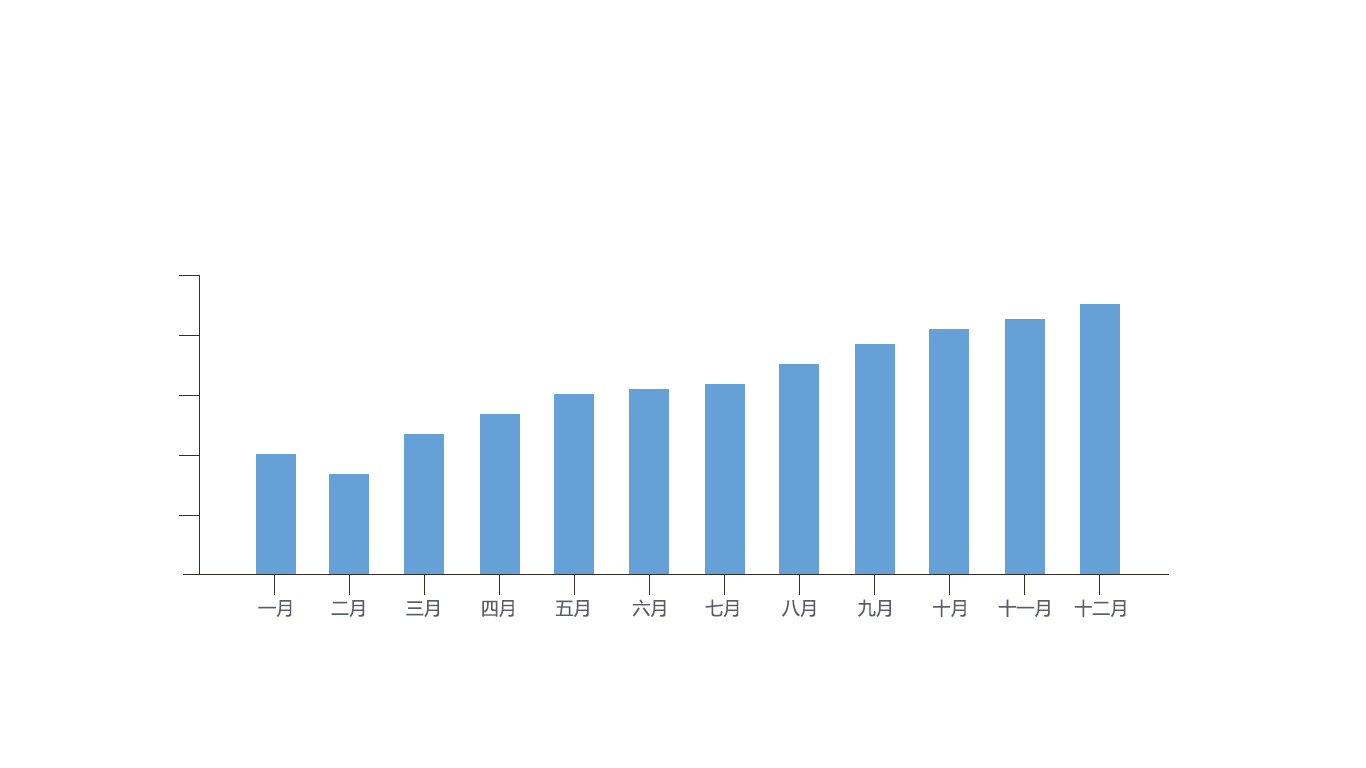
<style>
.page{position:relative;width:1366px;height:768px;background:#ffffff}
.page>*{position:absolute;margin:0}
.t1{font:18px "MicrosoftYaHei";color:#585d68}
</style>
<div class="page">
<p class="t1" style="left:258px;top:600px;width:34px;height:17px">一月</p>
<p class="t1" style="left:331px;top:600px;width:34px;height:17px">二月</p>
<p class="t1" style="left:406px;top:600px;width:33px;height:17px">三月</p>
<p class="t1" style="left:482px;top:600px;width:32px;height:17px">四月</p>
<p class="t1" style="left:555px;top:600px;width:34px;height:17px">五月</p>
<p class="t1" style="left:632px;top:599px;width:34px;height:18px">六月</p>
<p class="t1" style="left:705px;top:599px;width:34px;height:18px">七月</p>
<p class="t1" style="left:782px;top:600px;width:34px;height:17px">八月</p>
<p class="t1" style="left:858px;top:599px;width:33px;height:18px">九月</p>
<p class="t1" style="left:933px;top:599px;width:33px;height:18px">十月</p>
<p class="t1" style="left:998px;top:599px;width:52px;height:18px">十一月</p>
<p class="t1" style="left:1074px;top:599px;width:52px;height:18px">十二月</p>
</div>
